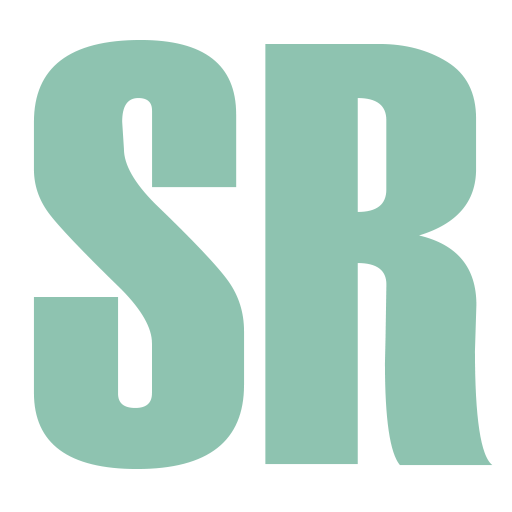
<style>
.page{position:relative;width:512px;height:512px;background:#8ec3b0}
.page>*{position:absolute;margin:0}
.t1{font:600px "Haettenschweiler";color:#8ec3b0}
</style>
<div class="page">
<p class="t1" style="left:33px;top:40px;width:460px;height:429px">SR</p>
</div>
